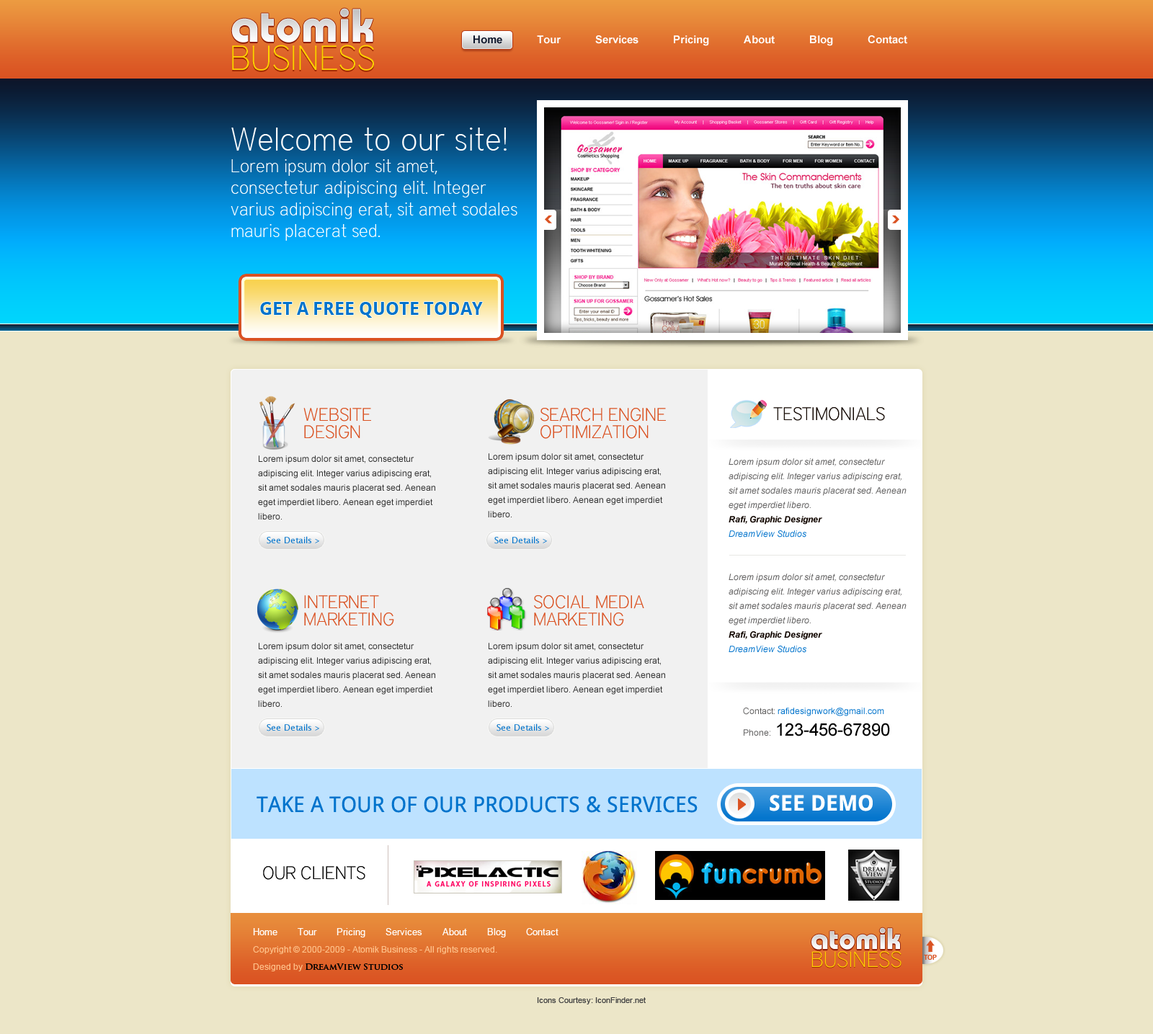
<style>
.page{position:relative;width:1153px;height:1034px;background:#ece6c8}
.page>*{position:absolute;margin:0}
.t1{font:46.8px "BahamasPSMT";color:#e9e9e9}
.t2{font:10.8px "Arial-BoldMT";color:#ffffff}
.t3{font:10.8px "Arial-BoldMT";color:#0c1429}
.t4{font:34.6px "DistrictThin";text-transform:uppercase}
.t5{font:34.6px "DistrictThin";color:#ffd200;text-transform:uppercase}
.t6{font:18px/21.6px "DistrictThin";color:#ffffff}
.t7{font:32.4px/25.9px "DistrictThin";color:#ffffff}
.t8{font:18px "DroidSans-Bold";color:#0073cc;text-transform:uppercase}
.t9{font:18px/17.3px "DistrictThin";color:#da5222;text-transform:uppercase}
.t10{font:18px "DistrictThin";color:#110600;text-transform:uppercase}
.t11{font:8.6px/14.4px "ArialMT";color:#333333}
.t12{font:8.6px/14.4px "Arial-ItalicMT";color:#605f5f}
.t13{font:8.6px/14.4px "Arial-BoldItalicMT";color:#110600}
.t14{font:8.6px/14.4px "Arial-ItalicMT";color:#0073cc}
.t15{font:8.6px "LucidaSans";color:#0073cc}
.t16{font:8.6px/21.6px "ArialMT";color:#0073cc}
.t17{font:8.6px/21.6px "ArialMT";color:#605f5f}
.t18{font:17.3px/21.6px "ArialMT";color:#010101}
.t19{font:21.6px "DroidSans";color:#0073cc;text-transform:uppercase}
.t20{font:21.6px "DroidSans-Bold";color:#ffffff;text-transform:uppercase}
.t21{font:18px "DistrictThin";color:#000000;text-transform:uppercase}
.t22{font:9.4px/17.3px "ArialMT";color:#ffffff}
.t23{font:8.6px/17.3px "ArialMT";color:#fec088}
.t24{font:8.6px/17.3px "TrajanPro-Bold";color:#000000}
.t25{font:29.4px "BahamasPSMT";color:#ececec}
.t26{font:21.7px "DistrictThin";text-transform:uppercase}
.t27{font:21.7px "DistrictThin";color:#ffd200;text-transform:uppercase}
.t28{font:6.5px "Arial-BoldMT";color:#da5222}
.t29{font:7.9px "ArialMT";color:#424242}
</style>
<div class="page">
<p class="t1" style="left:231px;top:8px;width:142px;height:35px">atomik</p>
<p class="t2" style="left:473px;top:35px;width:434px;height:11px"><span class="t3">Home            </span>Tour            Services            Pricing            About            Blog            Contact</p>
<p class="t4" style="left:232px;top:46px;width:142px;height:26px">Business</p>
<p class="t5" style="left:232px;top:45px;width:142px;height:26px">Business</p>
<p class="t6" style="left:231px;top:128px;width:286px;height:113px"><span class="t7">Welcome to our site!<br></span>Lorem ipsum dolor sit amet, consectetur adipiscing elit. Integer varius adipiscing erat, sit amet sodales mauris placerat sed.</p>
<p class="t8" style="left:260px;top:302px;width:223px;height:16px">get a free quote today</p>
<p class="t9" style="left:303px;top:408px;width:68px;height:31px">website<br>design</p>
<p class="t9" style="left:540px;top:408px;width:126px;height:31px">search engine<br>optimization</p>
<p class="t10" style="left:773px;top:407px;width:112px;height:14px">Testimonials</p>
<p class="t11" style="left:258px;top:455px;width:177px;height:65px">Lorem ipsum dolor sit amet, consectetur adipiscing elit. Integer varius adipiscing erat, sit amet sodales mauris placerat sed. Aenean eget imperdiet libero. Aenean eget imperdiet libero.</p>
<p class="t11" style="left:488px;top:453px;width:177px;height:64px">Lorem ipsum dolor sit amet, consectetur adipiscing elit. Integer varius adipiscing erat, sit amet sodales mauris placerat sed. Aenean eget imperdiet libero. Aenean eget imperdiet libero.</p>
<p class="t12" style="left:729px;top:458px;width:178px;height:195px">Lorem ipsum dolor sit amet, consectetur adipiscing elit. Integer varius adipiscing erat, sit amet sodales mauris placerat sed. Aenean eget imperdiet libero.<br><span class="t13">Rafi, Graphic Designer<br></span><span class="t14">DreamView Studios<br><br><br></span>Lorem ipsum dolor sit amet, consectetur adipiscing elit. Integer varius adipiscing erat, sit amet sodales mauris placerat sed. Aenean eget imperdiet libero.<br><span class="t13">Rafi, Graphic Designer<br></span><span class="t14">DreamView Studios</span></p>
<p class="t15" style="left:267px;top:536px;width:53px;height:8px">See Details &gt;</p>
<p class="t15" style="left:494px;top:536px;width:54px;height:8px">See Details &gt;</p>
<p class="t9" style="left:304px;top:595px;width:90px;height:31px">internet <br>marketing</p>
<p class="t9" style="left:534px;top:595px;width:110px;height:31px">social media<br>marketing</p>
<p class="t11" style="left:258px;top:643px;width:177px;height:64px">Lorem ipsum dolor sit amet, consectetur adipiscing elit. Integer varius adipiscing erat, sit amet sodales mauris placerat sed. Aenean eget imperdiet libero. Aenean eget imperdiet libero.</p>
<p class="t11" style="left:488px;top:643px;width:177px;height:64px">Lorem ipsum dolor sit amet, consectetur adipiscing elit. Integer varius adipiscing erat, sit amet sodales mauris placerat sed. Aenean eget imperdiet libero. Aenean eget imperdiet libero.</p>
<p class="t16" style="left:743px;top:708px;width:147px;height:29px"><span class="t17">Contact: </span>rafidesignwork@gmail.com<br><span class="t17">Phone:  </span><span class="t18">123-456-67890</span></p>
<p class="t15" style="left:267px;top:724px;width:53px;height:7px">See Details &gt;</p>
<p class="t15" style="left:497px;top:724px;width:53px;height:7px">See Details &gt;</p>
<p class="t19" style="left:257px;top:796px;width:441px;height:17px">take a tour of our products &amp; services</p>
<p class="t20" style="left:770px;top:795px;width:103px;height:16px">See Demo</p>
<p class="t21" style="left:263px;top:866px;width:102px;height:14px">Our Clients</p>
<p class="t22" style="left:253px;top:928px;width:306px;height:43px">Home       Tour       Pricing       Services       About       Blog       Contact<br><span class="t23">Copyright © 2000-2009 - Atomik Business - All rights reserved.<br>Designed by </span><span class="t24">DreamView Studios</span></p>
<p class="t25" style="left:811px;top:927px;width:90px;height:23px">atomik</p>
<p class="t26" style="left:811px;top:952px;width:91px;height:17px">Business</p>
<p class="t27" style="left:811px;top:951px;width:91px;height:17px">Business</p>
<p class="t28" style="left:924px;top:955px;width:13px;height:5px">TOP</p>
<p class="t29" style="left:537px;top:997px;width:109px;height:8px">Icons Courtesy: IconFinder.net</p>
</div>
